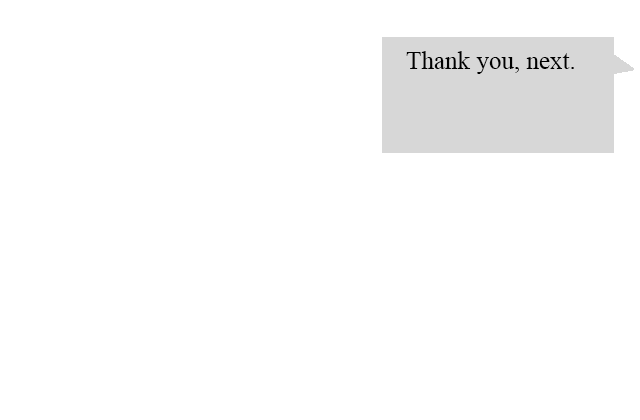
<style>
.page{position:relative;width:640px;height:420px;background:#ffffff}
.page>*{position:absolute;margin:0}
.t1{font:25px "TimesNewRomanPSMT";color:#000000}
</style>
<div class="page">
<p class="t1" style="left:406px;top:51px;width:168px;height:23px">Thank you, next.</p>
</div>
